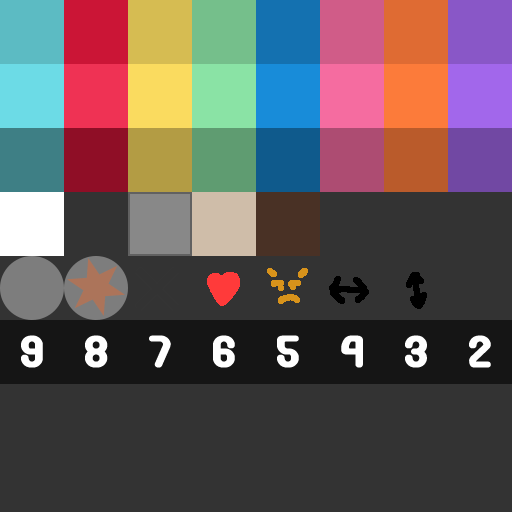
<style>
.page{position:relative;width:512px;height:512px;background:#333333}
.page>*{position:absolute;margin:0}
.t1{font:39px "Round_Pop";color:#ffffff}
</style>
<div class="page">
<p class="t1" style="left:21px;top:335px;width:22px;height:33px">9</p>
<p class="t1" style="left:85px;top:335px;width:23px;height:33px">8</p>
<p class="t1" style="left:149px;top:335px;width:22px;height:33px">7</p>
<p class="t1" style="left:213px;top:335px;width:22px;height:33px">6</p>
<p class="t1" style="left:277px;top:335px;width:22px;height:33px">5</p>
<p class="t1" style="left:341px;top:335px;width:22px;height:33px">4</p>
<p class="t1" style="left:405px;top:335px;width:22px;height:33px">3</p>
<p class="t1" style="left:469px;top:335px;width:22px;height:33px">2</p>
</div>
